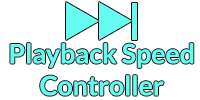
<style>
.page{position:relative;width:200px;height:100px;background:#ffffff}
.page>*{position:absolute;margin:0}
.t1{font:26.7px "Lato-Bold";color:#66fcf1}
</style>
<div class="page">
<p class="t1" style="left:10px;top:43px;width:184px;height:53px;text-align:center">Playback Speed<br>Controller</p>
</div>
